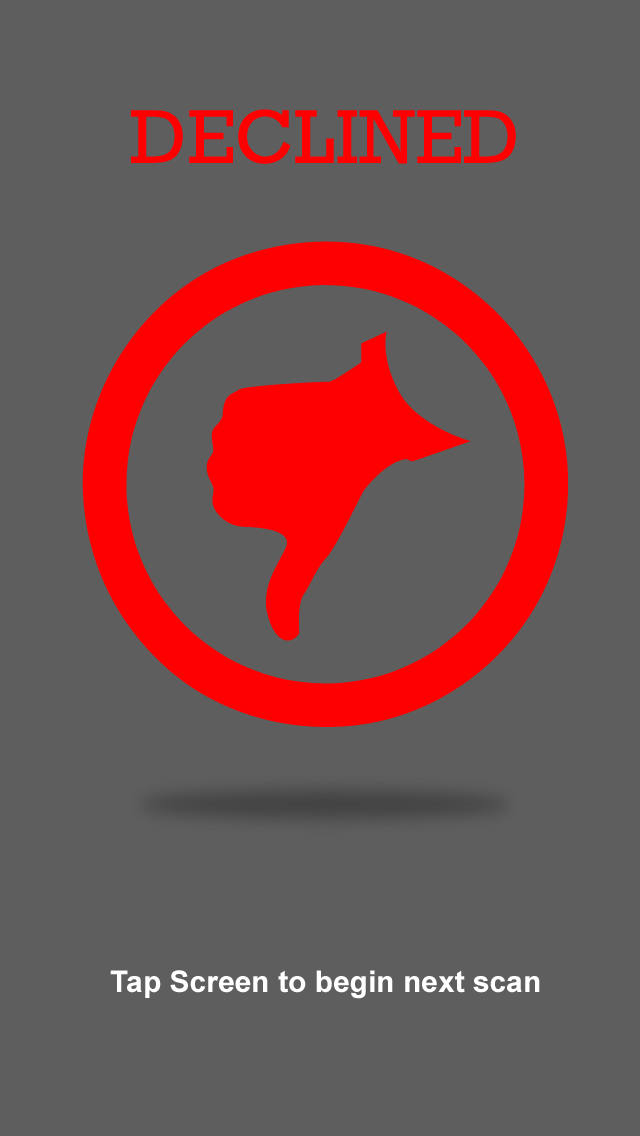
<style>
.page{position:relative;width:640px;height:1136px;background:#5e5e5e}
.page>*{position:absolute;margin:0}
.t1{font:77.7px "Rockwell";color:#ff0000}
.t2{font:30px "Arial-BoldMT";color:#ffffff}
</style>
<div class="page">
<p class="t1" style="left:131px;top:109px;width:385px;height:55px">DECLINED</p>
<p class="t2" style="left:110px;top:970px;width:430px;height:29px">Tap Screen to begin next scan</p>
</div>
